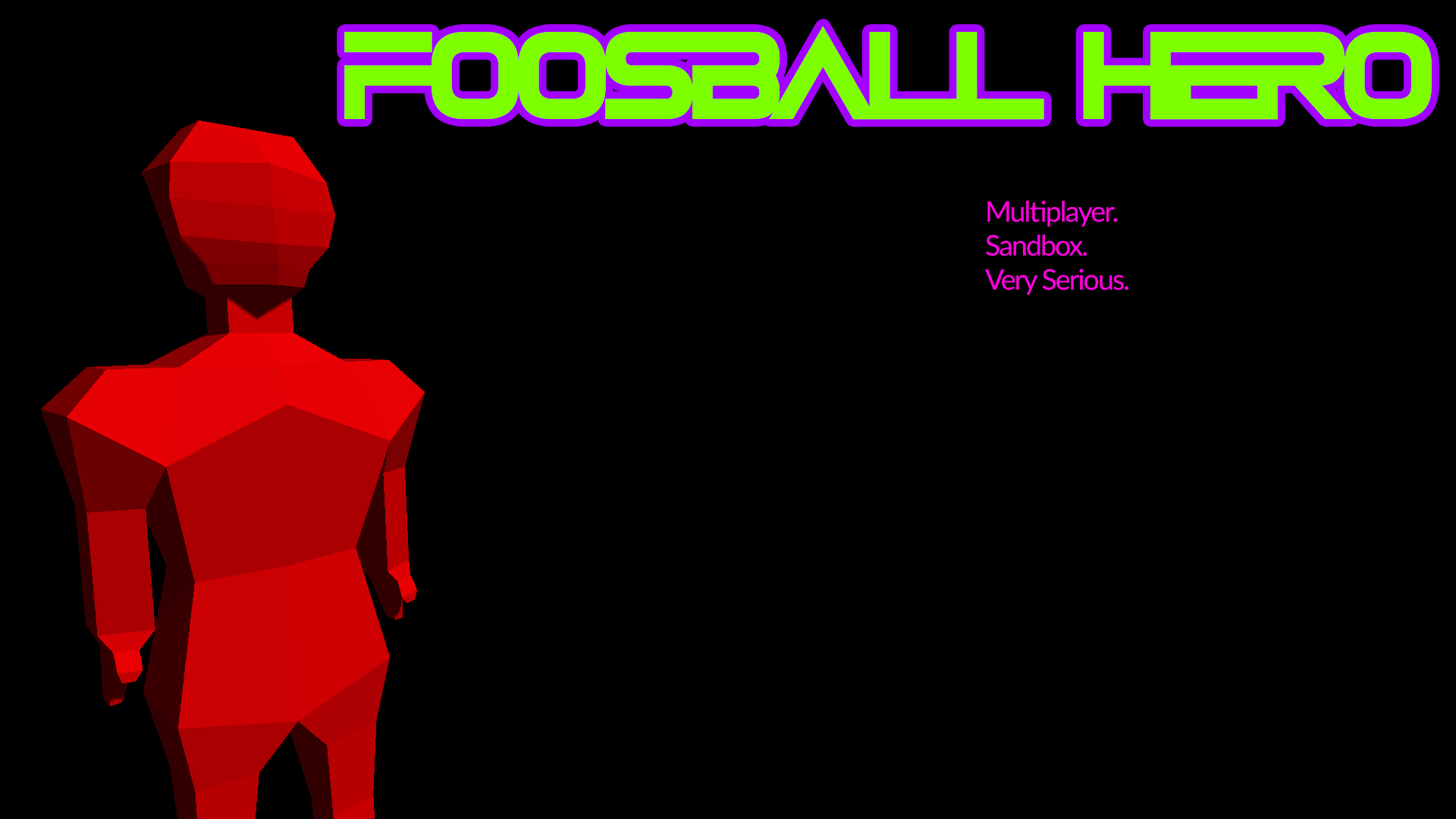
<style>
.page{position:relative;width:1456px;height:819px;background:#000000}
.page>*{position:absolute;margin:0}
.t1{font:137.3px "Vudotronic";letter-spacing:-0.05em;color:#7eff00;text-transform:uppercase}
.t2{font:28.4px "Lato-Regular";letter-spacing:-0.05em;color:#ff00dd}
</style>
<div class="page">
<p class="t1" style="left:344px;top:26px;width:1088px;height:94px">Foosball  hero</p>
<p class="t2" style="left:985px;top:200px;width:143px;height:95px">Multiplayer. <br>Sandbox. <br>Very Serious.</p>
</div>
